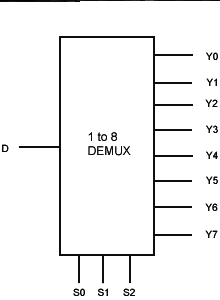
<style>
.page{position:relative;width:220px;height:300px;background:#ffffff}
.page>*{position:absolute;margin:0}
.t1{font:10px "ArialMT"}
.t2{font:10px "ArialMT";color:#0d0d0d}
.t3{font:12px "ArialMT"}
</style>
<div class="page">
<p class="t1" style="left:206px;top:51px;width:12px;height:8px">Y0</p>
<p class="t2" style="left:206px;top:77px;width:11px;height:8px">Y1</p>
<p class="t1" style="left:205px;top:98px;width:13px;height:8px">Y2</p>
<p class="t1" style="left:206px;top:124px;width:12px;height:8px">Y3</p>
<p class="t3" style="left:88px;top:131px;width:43px;height:24px">1 to 8<br>DEMUX</p>
<p class="t1" style="left:206px;top:150px;width:12px;height:8px">Y4</p>
<p class="t1" style="left:206px;top:175px;width:12px;height:8px">Y5</p>
<p class="t1" style="left:205px;top:202px;width:13px;height:8px">Y6</p>
</div>
